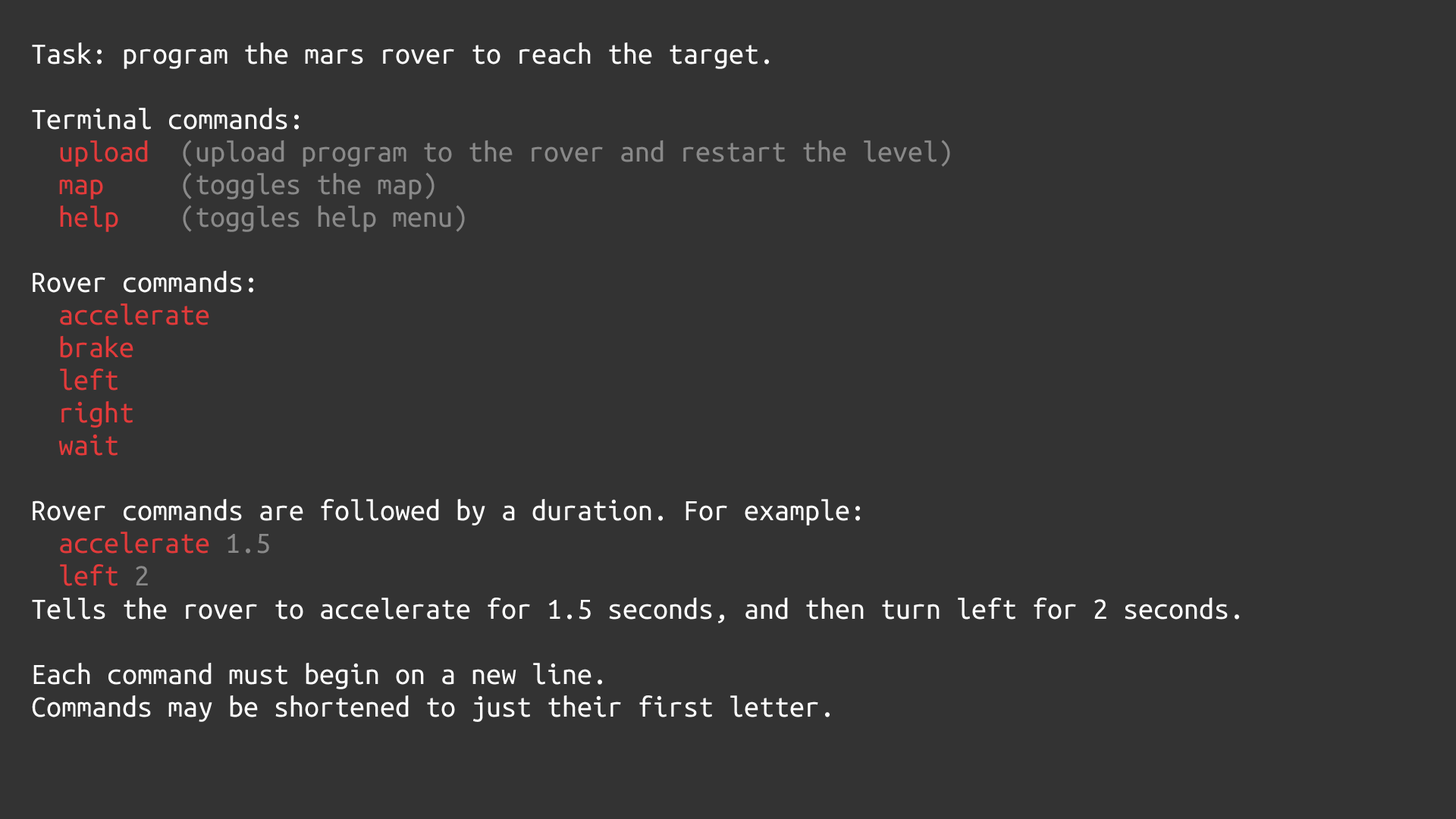
<style>
.page{position:relative;width:1456px;height:819px;background:#333333}
.page>*{position:absolute;margin:0}
.t1{font:30.6px/32.6px "UbuntuMono-Regular";color:#ffffff}
.t2{font:30.6px/32.6px "UbuntuMono-Regular";color:#e23a3a}
.t3{font:30.6px/32.6px "UbuntuMono-Regular";color:#898989}
</style>
<div class="page">
<p class="t1" style="left:32px;top:42px;width:1207px;height:680px">Task: program the mars rover to reach the target.<br><br>Terminal commands:<br> <span class="t2">upload  </span><span class="t3">(upload program to the rover and restart the level)<br> </span><span class="t2">map     </span><span class="t3">(toggles the map)<br> </span><span class="t2">help    </span><span class="t3">(toggles help menu)<br></span><br>Rover commands:<br> <span class="t2">accelerate<br> brake<br> left<br> right<br> wait<br></span><br>Rover commands are followed by a duration. For example:<br> <span class="t2">accelerate </span><span class="t3">1.5<br></span><span class="t2"> left </span><span class="t3">2<br></span>Tells the rover to accelerate for 1.5 seconds, and then turn left for 2 seconds.<br><br>Each command must begin on a new line.<br>Commands may be shortened to just their first letter.</p>
</div>
